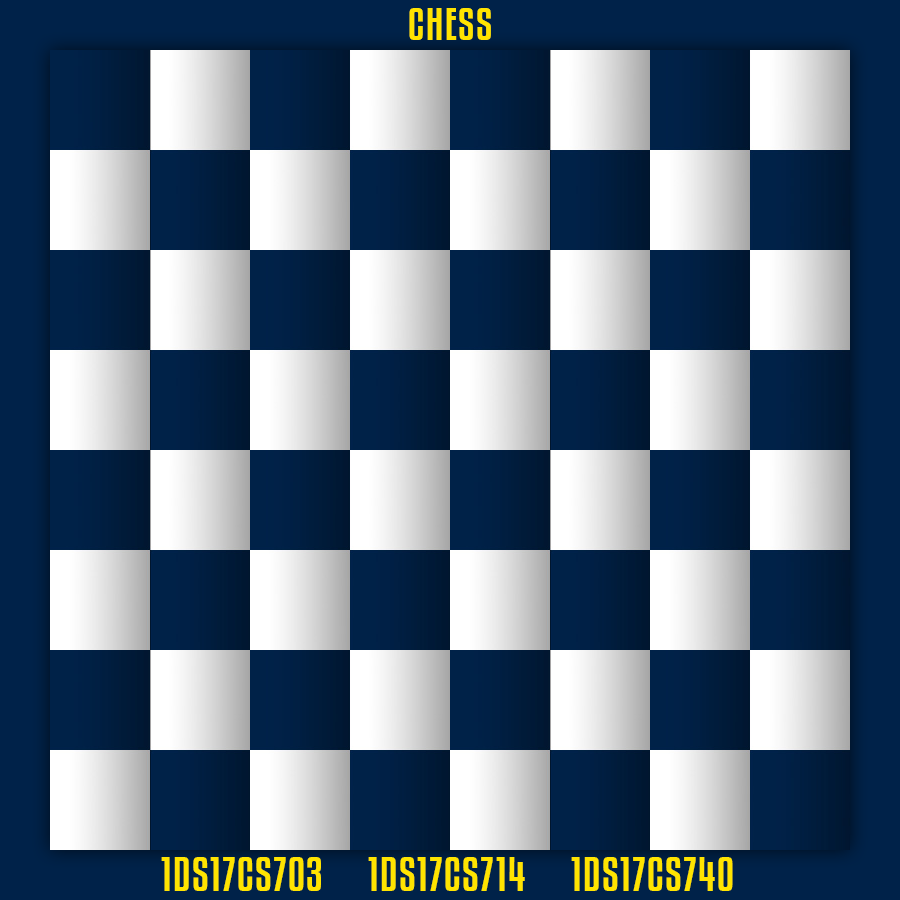
<style>
.page{position:relative;width:900px;height:900px}
.page>*{position:absolute;margin:0}
.t1{font:40.9px "KenyanCoffeeRg-Regular";letter-spacing:0.04em;color:#ffe400}
.t2{font:41.7px "KenyanCoffeeRg-Regular";letter-spacing:0.04em;color:#ffe400}
</style>
<div class="page">
<p class="t1" style="left:409px;top:8px;width:82px;height:32px">CHESS</p>
<p class="t2" style="left:161px;top:857px;width:572px;height:34px">1DS17CS703     1DS17CS714     1DS17CS740</p>
</div>
